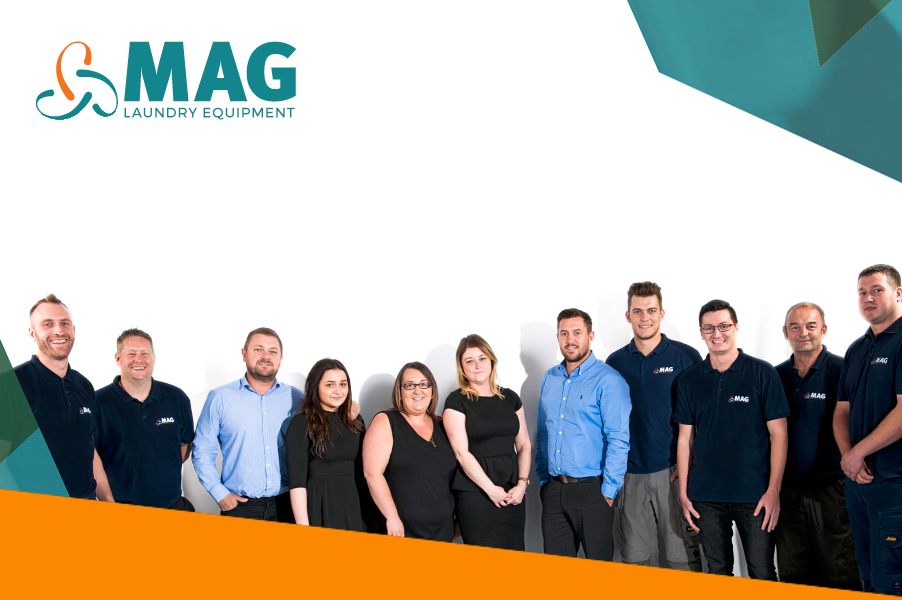
<style>
.page{position:relative;width:902px;height:600px;background:#ffffff}
.page>*{position:absolute;margin:0}
.t1{font:14px "Montserrat-Regular";letter-spacing:0.055em;color:#12868c;text-transform:uppercase}
</style>
<div class="page">
<p class="t1" style="left:124px;top:107px;width:171px;height:13px">Laundry Equipment</p>
</div>
